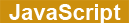
<style>
.page{position:relative;width:129px;height:23px;background:#cc8f0d}
.page>*{position:absolute;margin:0}
.t1{font:22.1px "Arial-BoldMT";color:#ffffff}
</style>
<div class="page">
<p class="t1" style="left:9px;top:4px;width:112px;height:20px">JavaScript</p>
</div>
